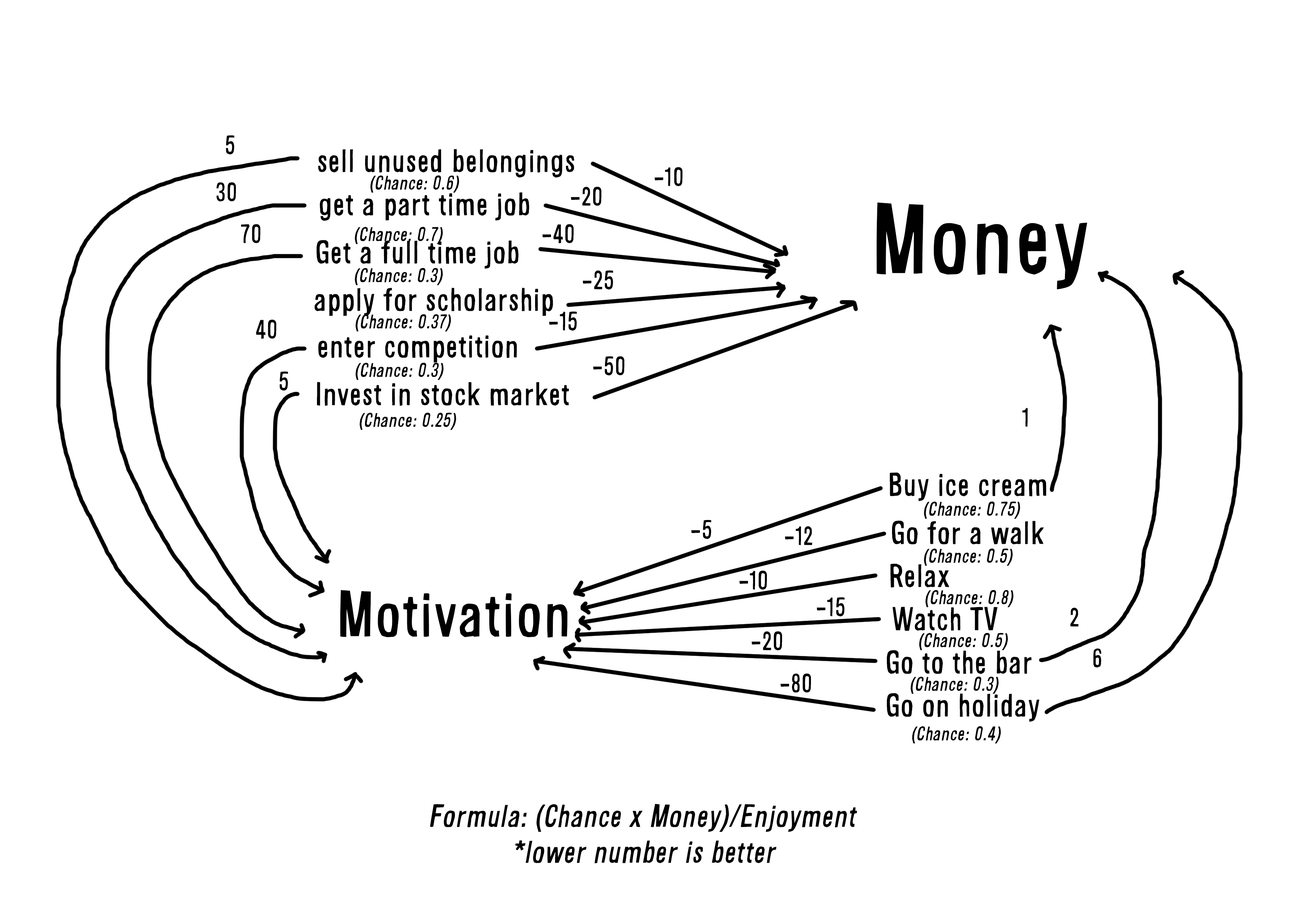
<style>
.page{position:relative;width:1299px;height:918px;background:#ffffff}
.page>*{position:absolute;margin:0}
.t1{font:24.7px "Alsina-Ultrajada";color:#000000}
.t2{font:30.9px "Alsina-Ultrajada";color:#000000}
.t3{font:18.5px "Alsina-Ultrajada";color:#000000;font-style:italic}
.t4{font:92.6px "Alsina-Ultrajada";color:#000000}
.t5{font:60.5px "Alsina-Ultrajada";color:#000000}
.t6{font:29.9px "Alsina-Ultrajada";color:#000000;font-style:italic}
</style>
<div class="page">
<p class="t1" style="left:226px;top:135px;width:8px;height:19px">5</p>
<p class="t2" style="left:318px;top:149px;width:256px;height:29px">sell unused belongings</p>
<p class="t1" style="left:655px;top:167px;width:27px;height:19px">-10</p>
<p class="t1" style="left:216px;top:182px;width:20px;height:19px">30</p>
<p class="t3" style="left:370px;top:175px;width:89px;height:18px">(Chance: 0.6)</p>
<p class="t2" style="left:320px;top:192px;width:209px;height:29px">get a part time job</p>
<p class="t1" style="left:571px;top:187px;width:30px;height:19px">-20</p>
<p class="t4" style="left:876px;top:203px;width:211px;height:87px">Money</p>
<p class="t1" style="left:241px;top:224px;width:19px;height:19px">70</p>
<p class="t3" style="left:355px;top:227px;width:88px;height:17px">(Chance: 0.7)</p>
<p class="t1" style="left:542px;top:224px;width:31px;height:20px">-40</p>
<p class="t2" style="left:317px;top:240px;width:201px;height:29px">Get a full time job</p>
<p class="t3" style="left:355px;top:268px;width:88px;height:17px">(Chance: 0.3)</p>
<p class="t1" style="left:583px;top:270px;width:30px;height:20px">-25</p>
<p class="t2" style="left:314px;top:288px;width:239px;height:28px">apply for scholarship</p>
<p class="t3" style="left:355px;top:314px;width:96px;height:18px">(Chance: 0.37)</p>
<p class="t1" style="left:549px;top:311px;width:28px;height:20px">-15</p>
<p class="t1" style="left:256px;top:320px;width:20px;height:19px">40</p>
<p class="t2" style="left:318px;top:335px;width:199px;height:28px">enter competition</p>
<p class="t3" style="left:355px;top:363px;width:89px;height:17px">(Chance: 0.3)</p>
<p class="t1" style="left:593px;top:356px;width:31px;height:19px">-50</p>
<p class="t1" style="left:280px;top:371px;width:8px;height:20px">5</p>
<p class="t2" style="left:317px;top:382px;width:252px;height:24px">Invest in stock market</p>
<p class="t3" style="left:359px;top:413px;width:97px;height:17px">(Chance: 0.25)</p>
<p class="t1" style="left:1022px;top:408px;width:6px;height:19px">1</p>
<p class="t2" style="left:890px;top:472px;width:156px;height:29px">Buy ice cream</p>
<p class="t3" style="left:924px;top:502px;width:96px;height:17px">(Chance: 0.75)</p>
<p class="t1" style="left:691px;top:520px;width:20px;height:19px">-5</p>
<p class="t2" style="left:892px;top:521px;width:152px;height:24px">Go for a walk</p>
<p class="t1" style="left:785px;top:526px;width:27px;height:19px">-12</p>
<p class="t3" style="left:924px;top:549px;width:89px;height:17px">(Chance: 0.5)</p>
<p class="t2" style="left:890px;top:564px;width:59px;height:24px">Relax</p>
<p class="t1" style="left:739px;top:571px;width:28px;height:19px">-10</p>
<p class="t5" style="left:340px;top:590px;width:228px;height:48px">Motivation</p>
<p class="t3" style="left:925px;top:590px;width:88px;height:18px">(Chance: 0.8)</p>
<p class="t1" style="left:817px;top:597px;width:27px;height:19px">-15</p>
<p class="t2" style="left:892px;top:607px;width:105px;height:24px">Watch TV</p>
<p class="t1" style="left:1070px;top:608px;width:8px;height:19px">2</p>
<p class="t1" style="left:752px;top:631px;width:30px;height:19px">-20</p>
<p class="t3" style="left:919px;top:633px;width:89px;height:17px">(Chance: 0.5)</p>
<p class="t2" style="left:887px;top:650px;width:144px;height:24px">Go to the bar</p>
<p class="t1" style="left:1093px;top:648px;width:8px;height:20px">6</p>
<p class="t1" style="left:780px;top:673px;width:31px;height:20px">-80</p>
<p class="t3" style="left:910px;top:677px;width:88px;height:17px">(Chance: 0.3)</p>
<p class="t2" style="left:887px;top:693px;width:152px;height:29px">Go on holiday</p>
<p class="t3" style="left:912px;top:726px;width:89px;height:18px">(Chance: 0.4)</p>
<p class="t6" style="left:430px;top:804px;width:427px;height:59px;text-align:center">Formula: (Chance x Money)/Enjoyment <br>*lower number is better</p>
</div>
